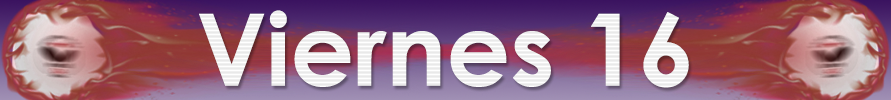
<style>
.page{position:relative;width:891px;height:100px}
.page>*{position:absolute;margin:0}
.t1{font:100px "CenturyGothic-Bold";color:#f1f1f1}
</style>
<div class="page">
<p class="t1" style="left:199px;top:10px;width:490px;height:78px">Viernes 16</p>
</div>
